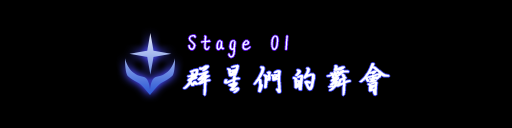
<style>
.page{position:relative;width:512px;height:128px;background:#000000}
.page>*{position:absolute;margin:0}
.t1{font:24px "HYHanShiTiF";letter-spacing:0.15em;color:#ffffff}
.t2{font:30px "HYHanShiTiF";letter-spacing:0.15em;color:#ffffff;font-weight:bold}
</style>
<div class="page">
<p class="t1" style="left:188px;top:35px;width:100px;height:23px">Stage 01</p>
<p class="t2" style="left:183px;top:63px;width:207px;height:33px">群星们的舞会</p>
</div>
